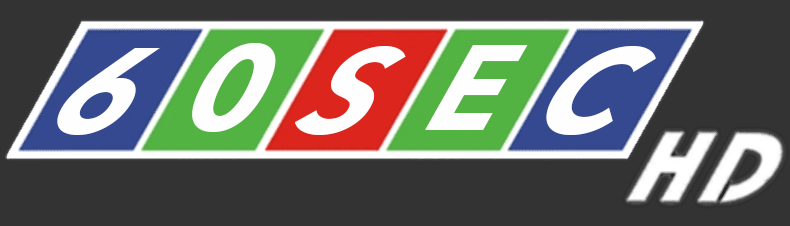
<style>
.page{position:relative;width:790px;height:226px;background:#333333}
.page>*{position:absolute;margin:0}
.t1{font:137.9px "AvenirNext-BoldItalic";color:#fefefe;scale:0.87 1}
.t2{font:126.6px "AvenirNext-BoldItalic";color:#fefefe;scale:0.95 1}
.t3{font:128.7px "AvenirNext-BoldItalic";color:#fefefe;scale:0.93 1}
</style>
<div class="page">
<p class="t1" style="left:57px;top:48px;width:103px;height:87px">6</p>
<p class="t2" style="left:192px;top:43px;width:84px;height:89px">0</p>
<p class="t1" style="left:294px;top:46px;width:112px;height:89px">S</p>
<p class="t3" style="left:425px;top:45px;width:103px;height:85px">E</p>
<p class="t1" style="left:546px;top:46px;width:110px;height:89px">C</p>
</div>
